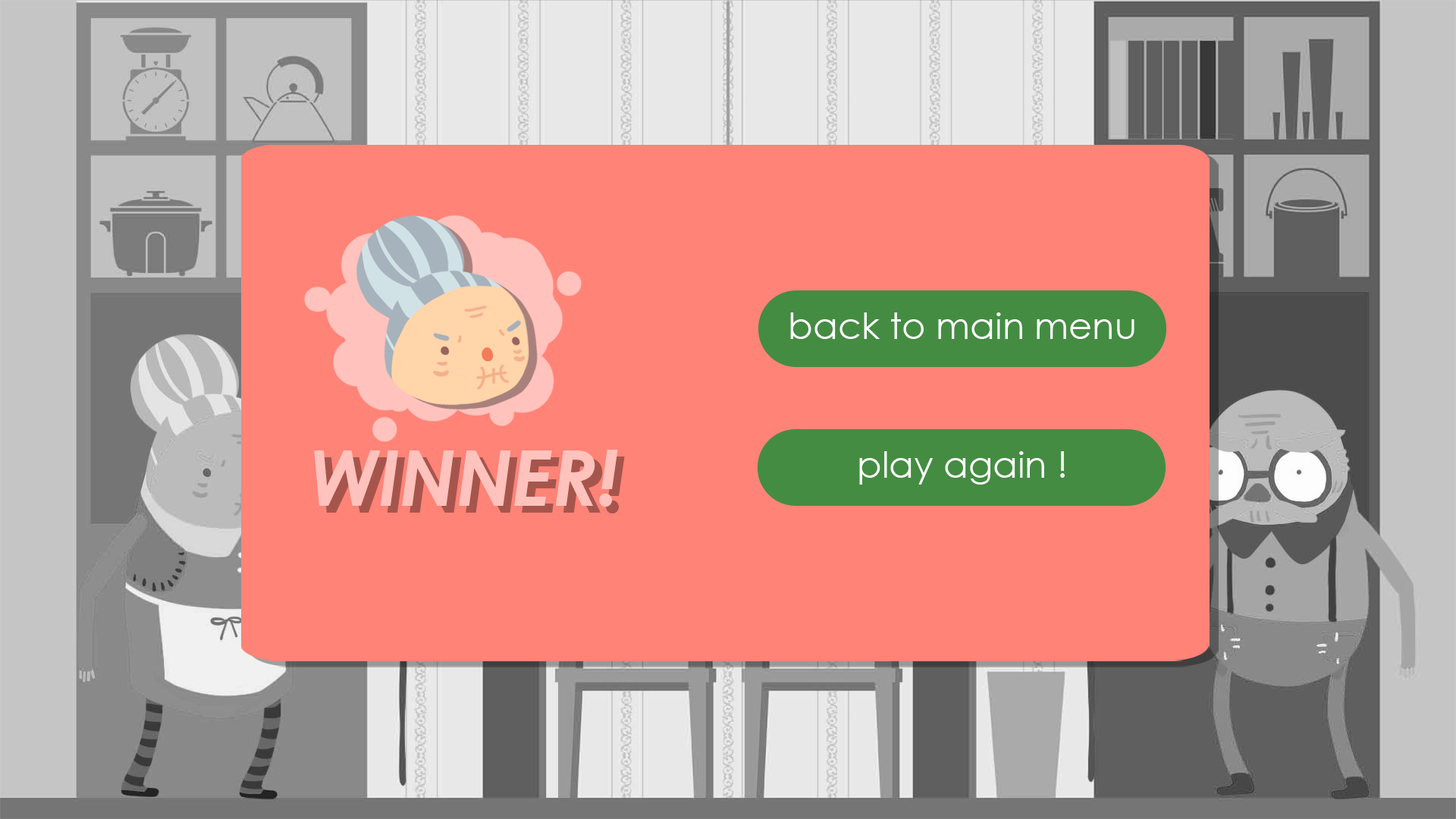
<style>
.page{position:relative;width:1456px;height:819px;background:#ff8377}
.page>*{position:absolute;margin:0}
.t1{font:36.4px "CenturyGothic";color:#ffffff}
.t2{font:76.6px "CenturyGothic-BoldItalic";color:#ffc2bc}
.t3{font:76.6px "CenturyGothic-BoldItalic"}
</style>
<div class="page">
<p class="t1" style="left:790px;top:312px;width:344px;height:27px">back to main menu</p>
<p class="t2" style="left:314px;top:450px;width:304px;height:57px">WINNER!</p>
<p class="t3" style="left:322px;top:457px;width:303px;height:56px">WINNER!</p>
<p class="t1" style="left:859px;top:451px;width:206px;height:34px">play again !</p>
</div>
